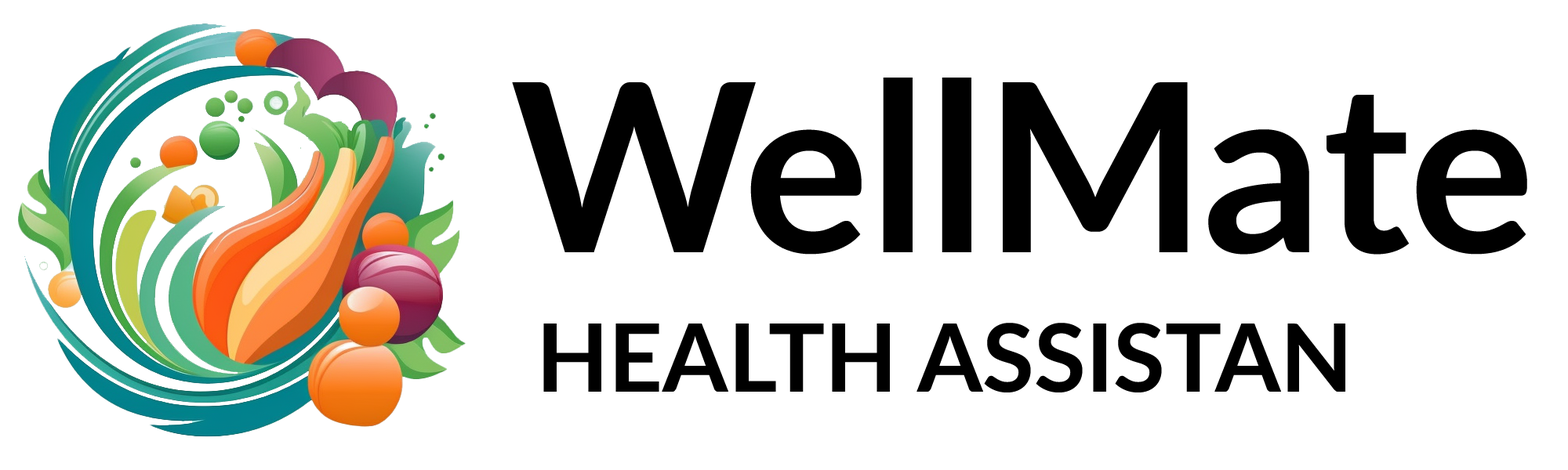
<style>
.page{position:relative;width:1568px;height:470px;background:#ffffff}
.page>*{position:absolute;margin:0}
.t1{font:235.2px "Lato-Bold";color:#000000}
.t2{font:94.1px "Lato-Bold";color:#000000}
</style>
<div class="page">
<p class="t1" style="left:512px;top:78px;width:1015px;height:177px">WellMate</p>
<p class="t2" style="left:543px;top:323px;width:802px;height:70px">HEALTH ASSISTAN</p>
</div>
